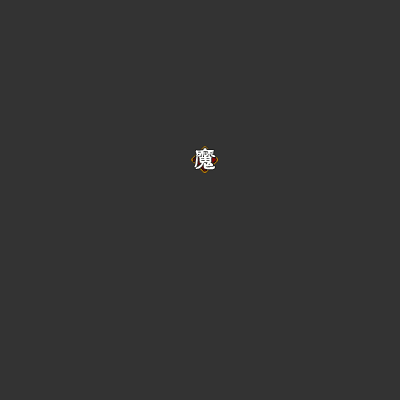
<style>
.page{position:relative;width:400px;height:400px;background:#333333}
.page>*{position:absolute;margin:0}
.t1{font:25px "¾­µä·±½ÇÁ¥ Regular";color:#fffffe;font-weight:bold}
</style>
<div class="page">
<p class="t1" style="left:194px;top:148px;width:22px;height:22px">魔</p>
</div>
